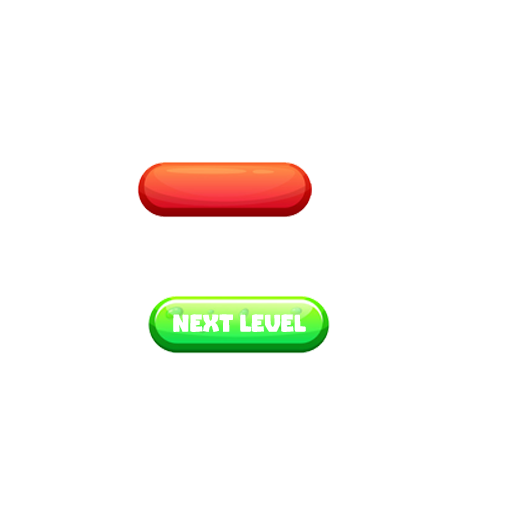
<style>
.page{position:relative;width:512px;height:512px;background:#ffffff}
.page>*{position:absolute;margin:0}
.t1{font:25px "GUMDROPRegular";color:#ffffff}
</style>
<div class="page">
<p class="t1" style="left:173px;top:314px;width:133px;height:18px">NEXT LEVEL</p>
</div>
